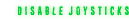
<style>
.page{position:relative;width:129px;height:20px;background:#ffffff}
.page>*{position:absolute;margin:0}
.t1{font:12px "Sunzoomspark";color:#00d03b}
</style>
<div class="page">
<p class="t1" style="left:18px;top:6px;width:111px;height:10px">D I S A B L E  J O Y S T I C K S</p>
</div>
